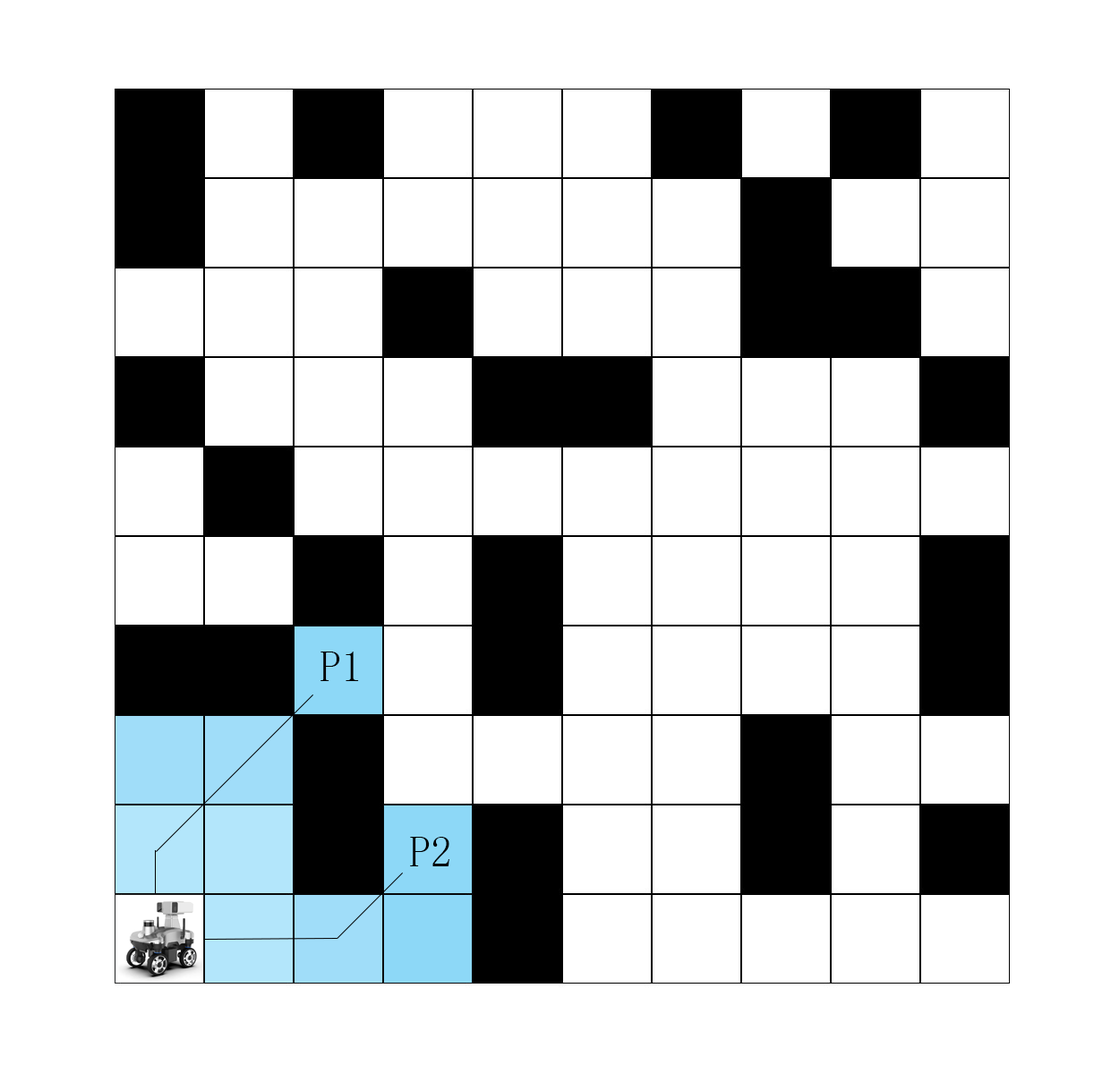
<style>
.page{position:relative;width:1102px;height:1082px;background:#ffffff}
.page>*{position:absolute;margin:0}
.t1{font:43px "SimSun";color:#000000}
</style>
<div class="page">
<p class="t1" style="left:320px;top:652px;width:39px;height:29px">P1</p>
<p class="t1" style="left:410px;top:837px;width:39px;height:29px">P2</p>
</div>
